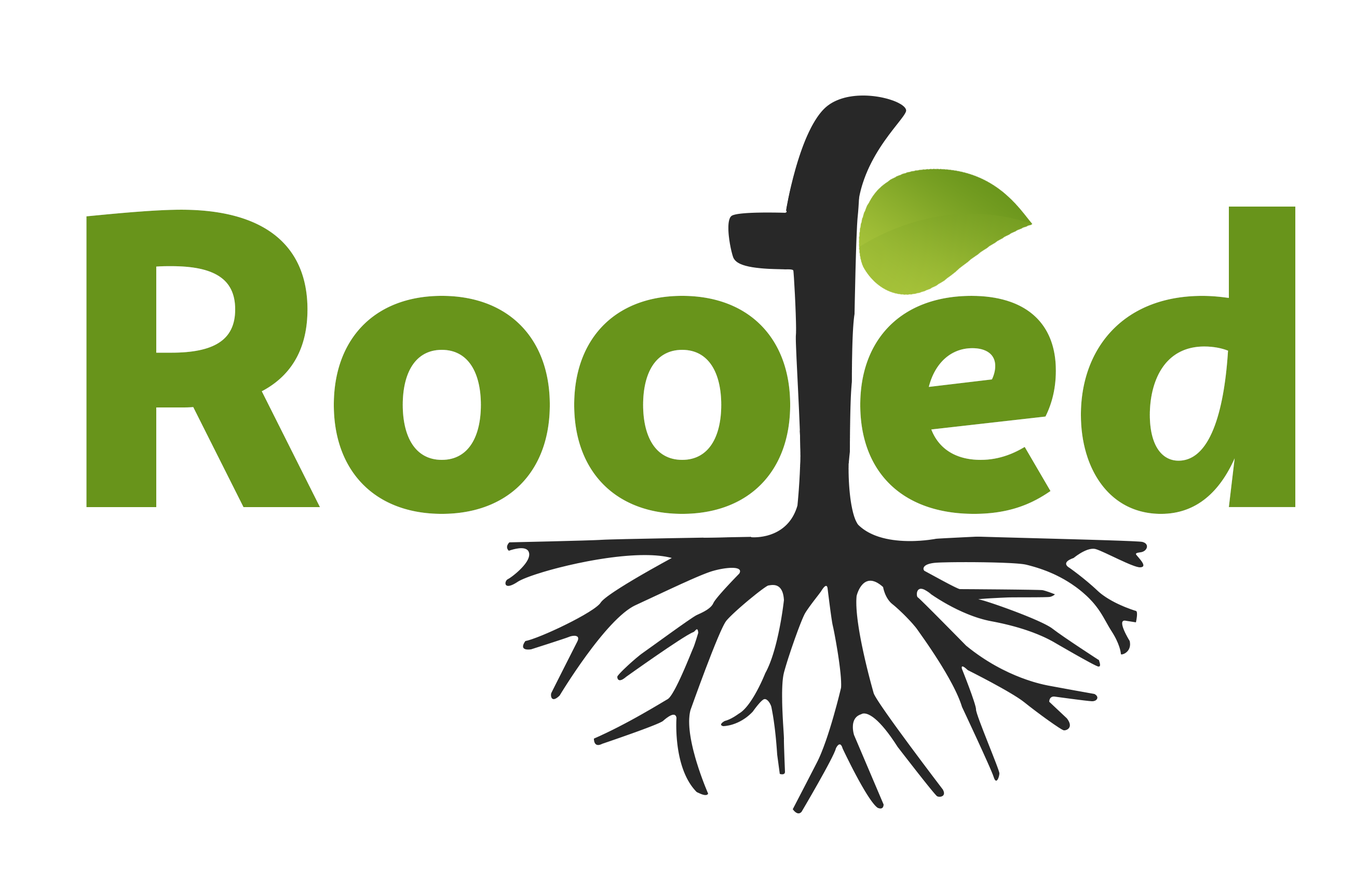
<style>
.page{position:relative;width:1368px;height:872px;background:#ffffff}
.page>*{position:absolute;margin:0}
.t1{font:415.2px "CampuniDemo-Black";color:#68941b}
</style>
<div class="page">
<p class="t1" style="left:86px;top:207px;width:1209px;height:307px">Roo ed</p>
</div>
